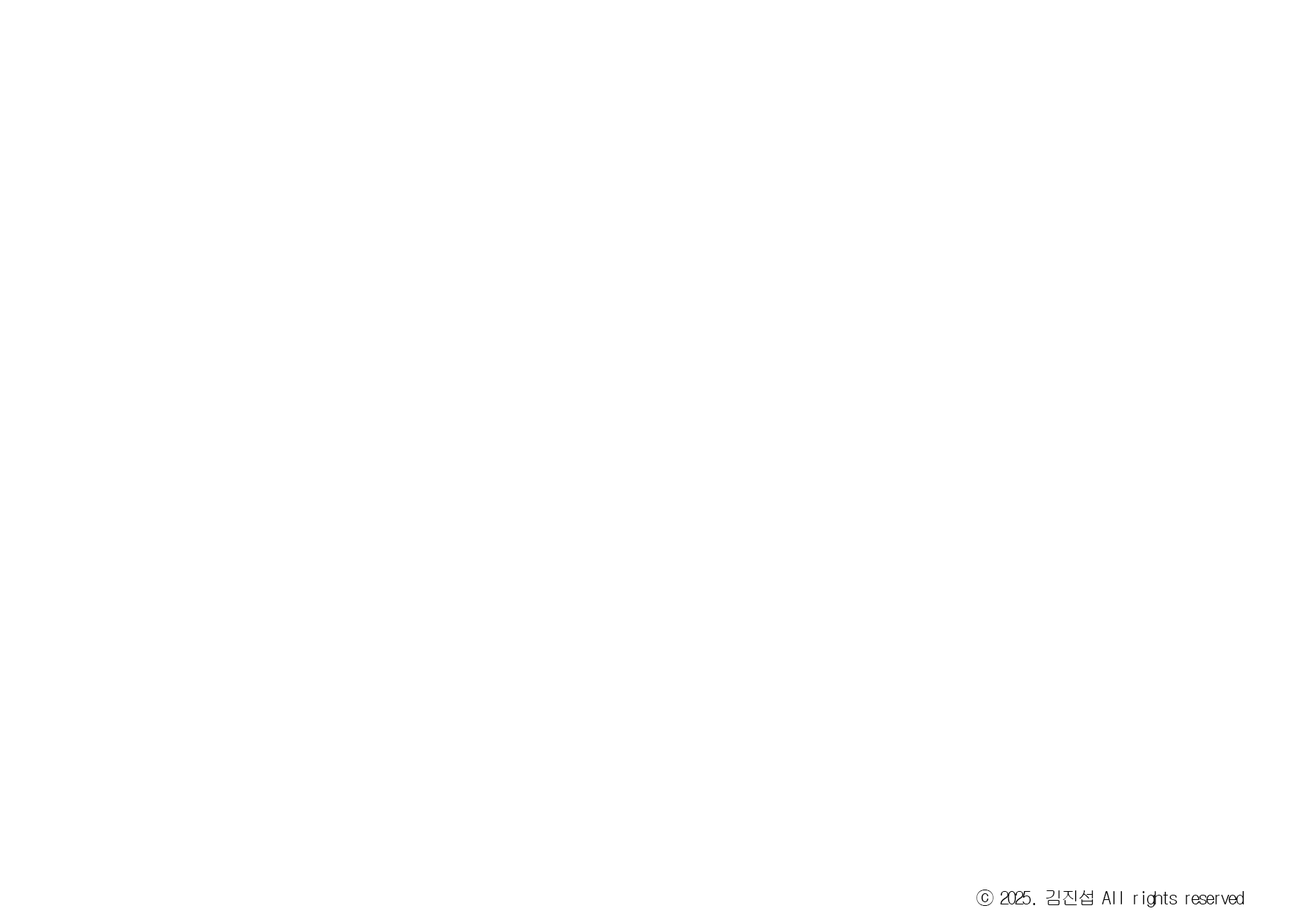
<style>
.page{position:relative;width:1297px;height:920px;background:#ffffff}
.page>*{position:absolute;margin:0}
.t1{font:18.5px "GulimChe";letter-spacing:-0.1em;color:#000000}
</style>
<div class="page">
<p class="t1" style="left:976px;top:889px;width:268px;height:18px">ⓒ 2025. 김진섭 All rights reserved</p>
</div>
